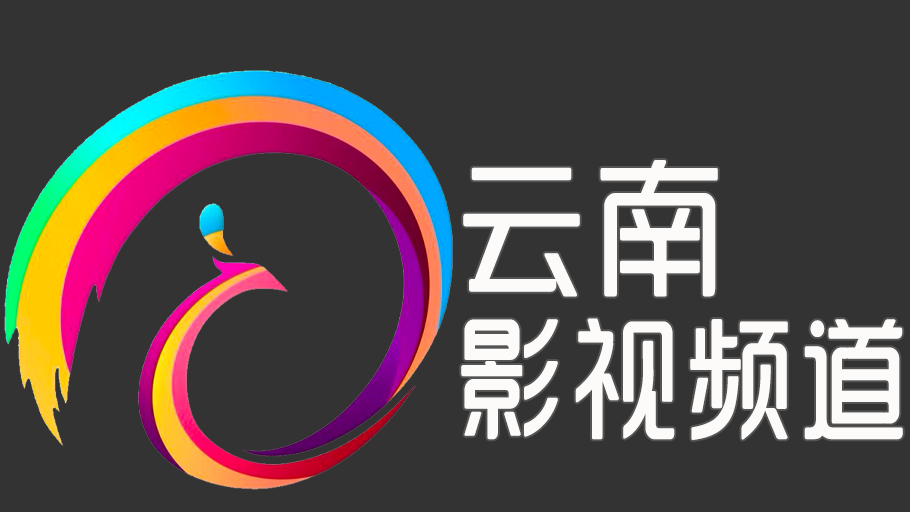
<style>
.page{position:relative;width:910px;height:512px;background:#333333}
.page>*{position:absolute;margin:0}
.t1{font:132px/160px "SJyunlvyuan";letter-spacing:0.02em;color:#fcfbf9;scale:0.85 1}
.t2{font:150px/160px "SJyunlvyuan";letter-spacing:0.02em;color:#fcfbf9;scale:0.9 1}
</style>
<div class="page">
<p class="t1" style="left:461px;top:160px;width:442px;height:280px"><span class="t2">云南<br></span>影视频道</p>
</div>
